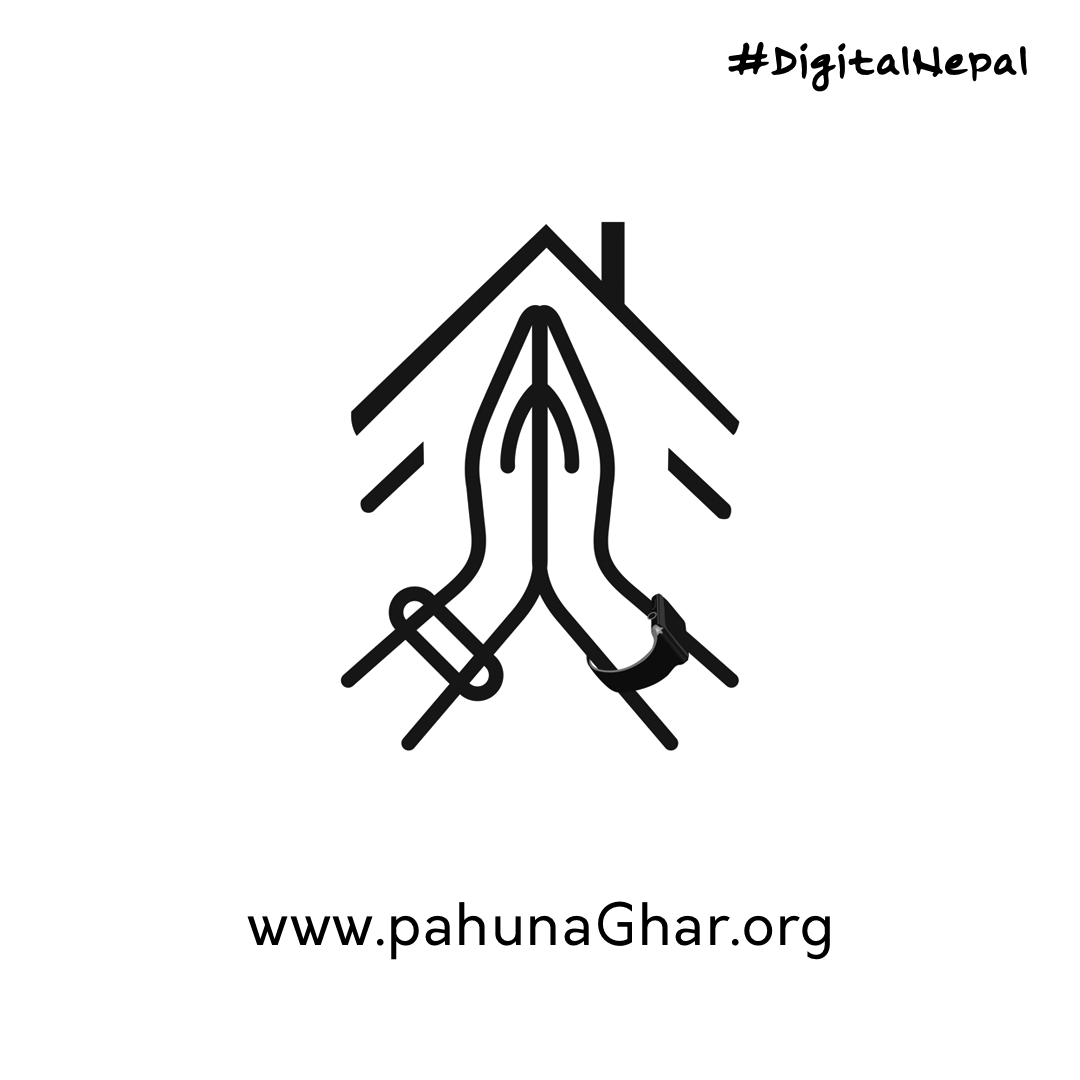
<style>
.page{position:relative;width:1080px;height:1080px;background:#ffffff}
.page>*{position:absolute;margin:0}
.t1{font:40.5px "Pracas";letter-spacing:0.03em;color:#000000}
.t2{font:57.2px "Orkney-Regular";letter-spacing:0.03em;color:#000000}
</style>
<div class="page">
<p class="t1" style="left:728px;top:41px;width:299px;height:51px">#DigitalNepal</p>
<p class="t2" style="left:247px;top:901px;width:583px;height:59px">www.pahunaGhar.org</p>
</div>
